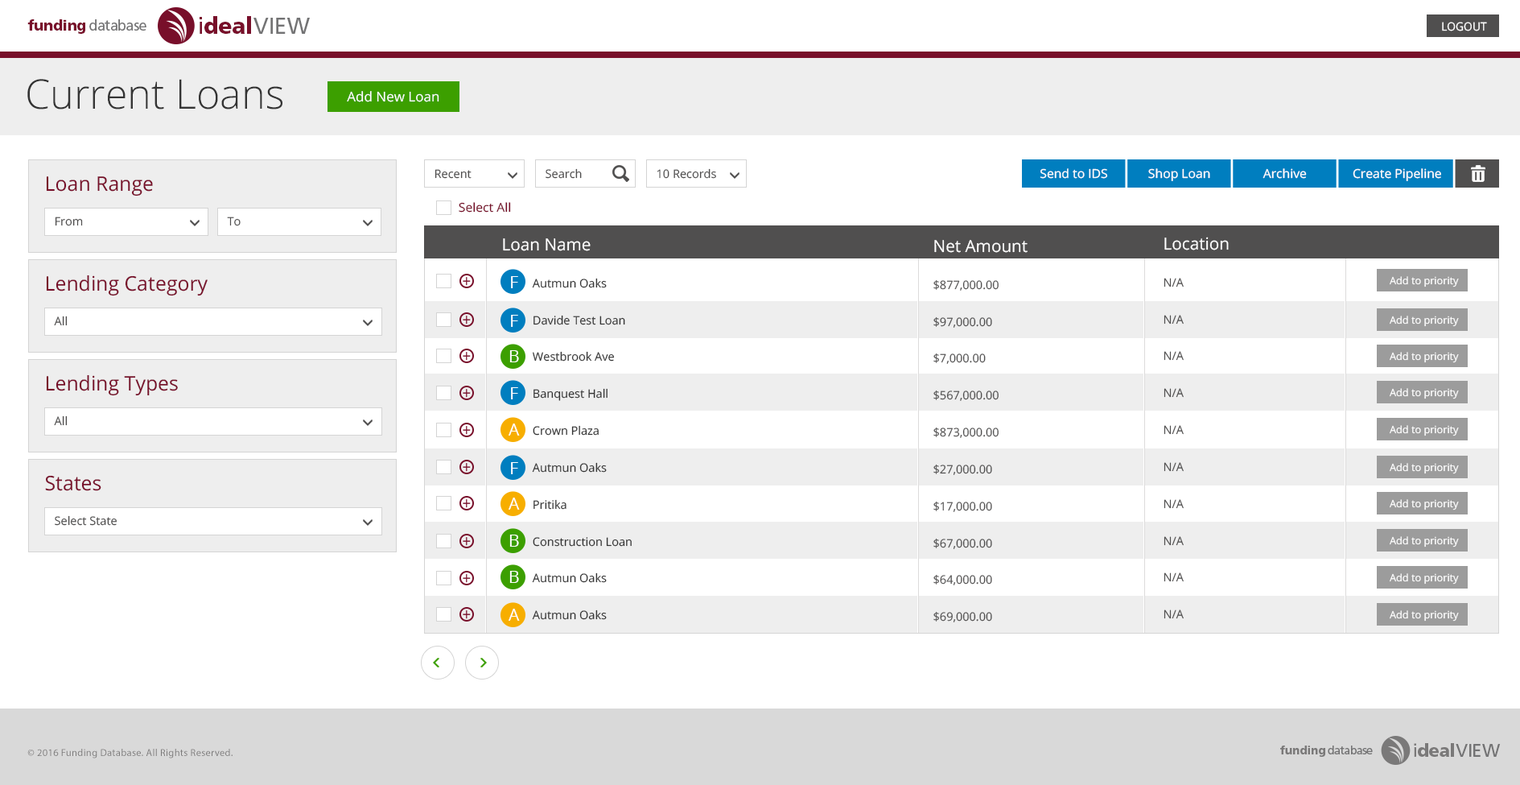
<style>
.page{position:relative;width:1520px;height:785px;background:#ffffff}
.page>*{position:absolute;margin:0}
.t1{font:23px "FrutigerLTStd-Black";letter-spacing:-0.025em;color:#780f2a}
.t2{font:23px "FrutigerLTStd-Roman";letter-spacing:-0.025em;color:#780f2a}
.t3{font:23px "FrutigerLTStd-Black";letter-spacing:0.035em;color:#780f2a}
.t4{font:23px "FrutigerLTStd-Roman";letter-spacing:-0.005em;color:#737374;text-transform:uppercase}
.t5{font:23px "FrutigerLTStd-Roman";letter-spacing:-0.045em;color:#737374;text-transform:uppercase}
.t6{font:23px "FrutigerLTStd-Roman";letter-spacing:0.015em;color:#737374;text-transform:uppercase}
.t7{font:14.7px "FrutigerLTStd-Roman";letter-spacing:-0.045em;color:#737374}
.t8{font:14.7px "FrutigerLTStd-Black";letter-spacing:-0.025em;color:#780f2a}
.t9{font:11.4px "OpenSans";color:#ffffff;text-transform:uppercase}
.t10{font:40.8px "OpenSans-Light";color:#343434}
.t11{font:13.4px "OpenSans";color:#ffffff}
.t12{font:11.7px "OpenSans";color:#504f4f}
.t13{font:12.4px "OpenSans";color:#ffffff}
.t14{font:20.1px "OpenSans";color:#780f2a}
.t15{font:12.4px "OpenSans";color:#780f2a}
.t16{font:11.7px/36.9px "OpenSans";color:#343434}
.t17{font:16.8px/6.9px "OpenSans";color:#ffffff}
.t18{font:11.7px/36.9px "OpenSans";color:#504f4f}
.t19{font:16.8px "OpenSans";letter-spacing:-0.025em;color:#ffffff}
.t20{font:10.1px "OpenSans";color:#ffffff}
.t21{font:10px "MyriadPro-Regular";letter-spacing:0.025em;color:#7a7979}
.t22{font:11.5px "FrutigerLTStd-Roman";letter-spacing:-0.045em;color:#737374}
.t23{font:11.5px "FrutigerLTStd-Black";letter-spacing:-0.025em;color:#7a7979}
.t24{font:18px "FrutigerLTStd-Black";letter-spacing:-0.025em;color:#7a7979}
.t25{font:18px "FrutigerLTStd-Roman";letter-spacing:-0.025em;color:#7a7979}
.t26{font:18px "FrutigerLTStd-Black";letter-spacing:0.035em;color:#7a7979}
.t27{font:18px "FrutigerLTStd-Roman";letter-spacing:-0.005em;color:#737374;text-transform:uppercase}
.t28{font:18px "FrutigerLTStd-Roman";letter-spacing:-0.045em;color:#737374;text-transform:uppercase}
.t29{font:18px "FrutigerLTStd-Roman";letter-spacing:0.015em;color:#737374;text-transform:uppercase}
</style>
<div class="page">
<p class="t1" style="left:200px;top:16px;width:110px;height:18px"><span class="t2">i</span>dea<span class="t3">l</span><span class="t4">V</span><span class="t5">i</span><span class="t6">e</span><span class="t5">w</span></p>
<p class="t7" style="left:27px;top:19px;width:119px;height:15px"><span class="t8">funding </span>database</p>
<p class="t9" style="left:1442px;top:22px;width:45px;height:9px">Logout</p>
<p class="t10" style="left:27px;top:79px;width:255px;height:30px">Current Loans</p>
<p class="t11" style="left:347px;top:91px;width:92px;height:11px">Add New Loan</p>
<p class="t12" style="left:435px;top:169px;width:37px;height:10px">Recent</p>
<p class="t12" style="left:546px;top:168px;width:36px;height:11px">Search</p>
<p class="t12" style="left:657px;top:168px;width:59px;height:11px">10 Records</p>
<p class="t13" style="left:1040px;top:168px;width:68px;height:11px">Send to IDS</p>
<p class="t13" style="left:1148px;top:168px;width:62px;height:13px">Shop Loan</p>
<p class="t13" style="left:1262px;top:168px;width:45px;height:11px">Archive</p>
<p class="t13" style="left:1353px;top:168px;width:88px;height:13px">Create Pipeline</p>
<p class="t14" style="left:46px;top:176px;width:107px;height:20px">Loan Range</p>
<p class="t15" style="left:459px;top:202px;width:52px;height:10px">Select All</p>
<p class="t12" style="left:55px;top:216px;width:28px;height:10px">From</p>
<p class="t12" style="left:227px;top:216px;width:14px;height:10px">To</p>
<p class="t16" style="left:503px;top:238px;width:129px;height:382px"><span class="t17">Loan Name<br>    </span>Autmun Oaks<br>    Davide Test Loan<br>    Westbrook Ave<br>    Banquest Hall<br>    Crown Plaza<br>    Autmun Oaks<br>    Pritika<br>    Construction Loan<br>    Autmun Oaks<br>    Autmun Oaks</p>
<p class="t18" style="left:933px;top:240px;width:95px;height:382px"><span class="t17">Net Amount<br></span>$877,000.00<br>$97,000.00<br>$7,000.00<br>$567,000.00<br>$873,000.00<br>$27,000.00<br>$17,000.00<br>$67,000.00<br>$64,000.00<br>$69,000.00</p>
<p class="t18" style="left:1164px;top:237px;width:65px;height:382px"><span class="t17">Location<br></span>N/A<br>N/A<br>N/A<br>N/A<br>N/A<br>N/A<br>N/A<br>N/A<br>N/A<br>N/A</p>
<p class="t14" style="left:46px;top:274px;width:162px;height:22px">Lending Category</p>
<p class="t19" style="left:511px;top:276px;width:7px;height:12px">F</p>
<p class="t20" style="left:1390px;top:276px;width:69px;height:11px">Add to priority</p>
<p class="t12" style="left:54px;top:315px;width:14px;height:11px">All</p>
<p class="t19" style="left:511px;top:315px;width:7px;height:12px">F</p>
<p class="t20" style="left:1390px;top:315px;width:69px;height:12px">Add to priority</p>
<p class="t19" style="left:509px;top:350px;width:10px;height:12px">B</p>
<p class="t20" style="left:1390px;top:352px;width:69px;height:11px">Add to priority</p>
<p class="t14" style="left:46px;top:374px;width:132px;height:22px">Lending Types</p>
<p class="t19" style="left:511px;top:387px;width:7px;height:12px">F</p>
<p class="t20" style="left:1390px;top:388px;width:69px;height:11px">Add to priority</p>
<p class="t12" style="left:54px;top:415px;width:14px;height:11px">All</p>
<p class="t19" style="left:509px;top:423px;width:11px;height:12px">A</p>
<p class="t20" style="left:1390px;top:425px;width:69px;height:11px">Add to priority</p>
<p class="t19" style="left:511px;top:462px;width:7px;height:12px">F</p>
<p class="t20" style="left:1390px;top:463px;width:69px;height:11px">Add to priority</p>
<p class="t14" style="left:45px;top:475px;width:56px;height:16px">States</p>
<p class="t19" style="left:509px;top:497px;width:11px;height:12px">A</p>
<p class="t20" style="left:1390px;top:499px;width:69px;height:11px">Add to priority</p>
<p class="t12" style="left:55px;top:515px;width:62px;height:10px">Select State</p>
<p class="t19" style="left:509px;top:534px;width:10px;height:12px">B</p>
<p class="t20" style="left:1390px;top:536px;width:69px;height:11px">Add to priority</p>
<p class="t19" style="left:509px;top:570px;width:10px;height:13px">B</p>
<p class="t20" style="left:1390px;top:573px;width:69px;height:11px">Add to priority</p>
<p class="t19" style="left:509px;top:608px;width:11px;height:12px">A</p>
<p class="t20" style="left:1390px;top:610px;width:69px;height:11px">Add to priority</p>
<p class="t21" style="left:27px;top:748px;width:206px;height:10px">© 2016 Funding Database. All Rights Reserved.</p>
<p class="t22" style="left:1280px;top:745px;width:93px;height:11px"><span class="t23">funding </span>database</p>
<p class="t24" style="left:1414px;top:743px;width:87px;height:13px"><span class="t25">i</span>dea<span class="t26">l</span><span class="t27">V</span><span class="t28">i</span><span class="t29">e</span><span class="t28">w</span></p>
</div>
